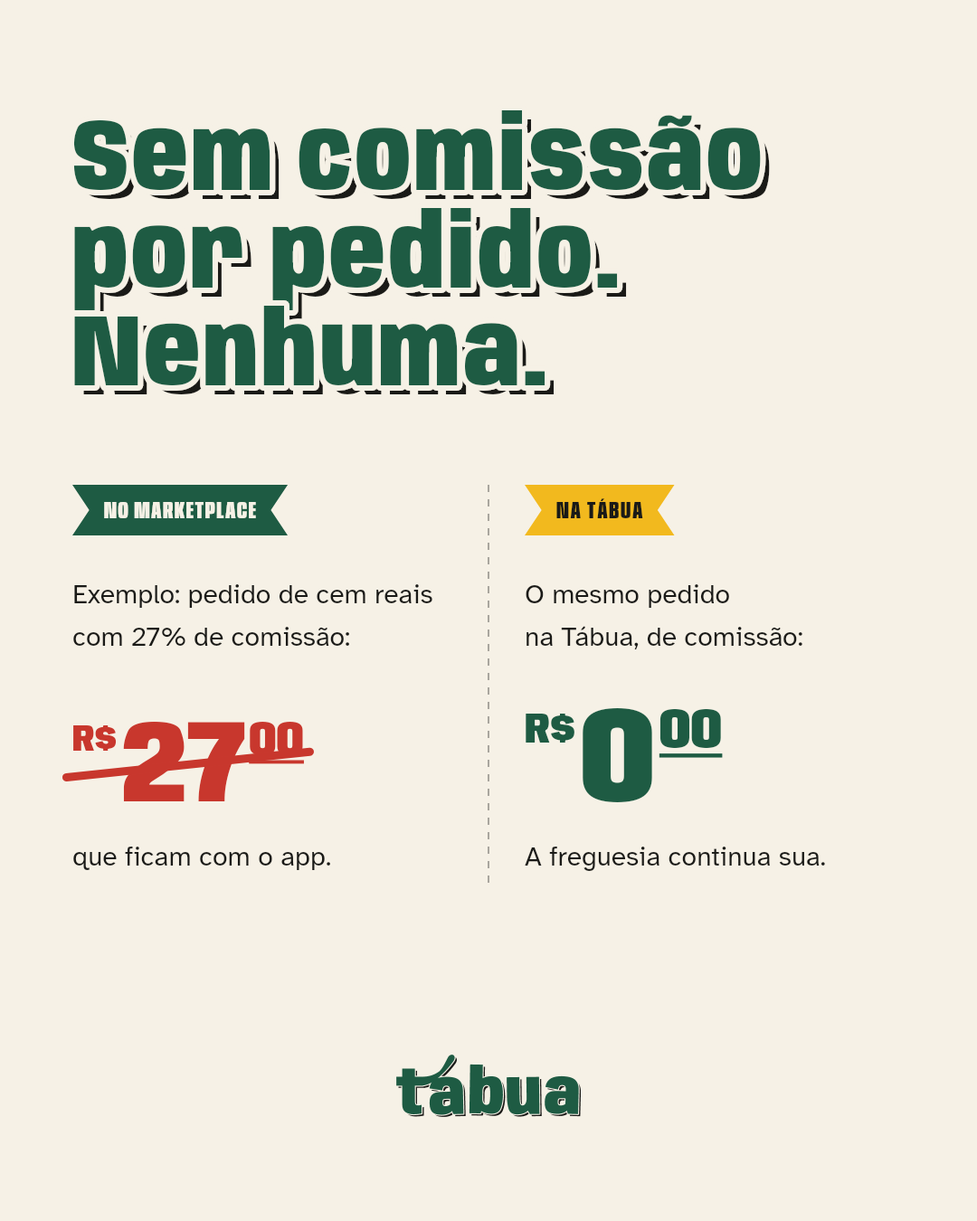
<style>
.page{position:relative;width:977px;height:1221px;background:#f6f1e6}
.page>*{position:absolute;margin:0}
.t1{font:101.3px/97.7px "Anybody-Black-W75";letter-spacing:0.034em;color:#1e5b43}
.t2{font:101.3px/97.7px "Anybody-Black-W75";letter-spacing:0.034em}
.t3{font:24.4px "Anybody-ExtraBold-W60";letter-spacing:0.06em;color:#f6f1e6}
.t4{font:24.4px "Anybody-ExtraBold-W60";letter-spacing:0.06em;color:#1a1a17}
.t5{font:27.1px/42.5px "AtkinsonHyperlegible-Regular";color:#1a1a17}
.t6{font:43.4px "Anybody-Black-W80";color:#1e5b43}
.t7{font:135.7px "Anybody-Black-W80";color:#1e5b43}
.t8{font:57px "Anybody-Black-W80";color:#1e5b43;text-decoration:underline}
.t9{font:38px "Anybody-Black-W80";color:#c8372d}
.t10{font:117.6px "Anybody-Black-W80";color:#c8372d}
.t11{font:49.7px "Anybody-Black-W80";color:#c8372d;text-decoration:underline}
.t12{font:27.1px "AtkinsonHyperlegible-Regular";color:#1a1a17}
</style>
<div class="page">
<p class="t1" style="left:68px;top:105px;width:698px;height:286px">Sem comissão<br>por pedido.<br>Nenhuma.</p>
<p class="t2" style="left:82px;top:119px;width:688px;height:275px">Sem comissão<br>por pedido.<br>Nenhuma.</p>
<p class="t3" style="left:104px;top:502px;width:152px;height:16px">NO MARKETPLACE</p>
<p class="t4" style="left:556px;top:498px;width:87px;height:20px">NA TÁBUA</p>
<p class="t5" style="left:73px;top:584px;width:359px;height:62px">Exemplo: pedido de cem reais<br>com 27% de comissão:</p>
<p class="t5" style="left:525px;top:584px;width:277px;height:65px">O mesmo pedido<br>na Tábua, de comissão:</p>
<p class="t6" style="left:525px;top:714px;width:49px;height:28px">R$</p>
<p class="t7" style="left:582px;top:708px;width:70px;height:94px">0</p>
<p class="t8" style="left:658px;top:709px;width:65px;height:49px">00</p>
<p class="t9" style="left:73px;top:725px;width:44px;height:26px">R$</p>
<p class="t10" style="left:123px;top:722px;width:122px;height:79px">27</p>
<p class="t11" style="left:249px;top:722px;width:55px;height:42px">00</p>
<p class="t12" style="left:73px;top:846px;width:257px;height:24px">que ficam com o app.</p>
<p class="t12" style="left:525px;top:846px;width:300px;height:25px">A freguesia continua sua.</p>
</div>
